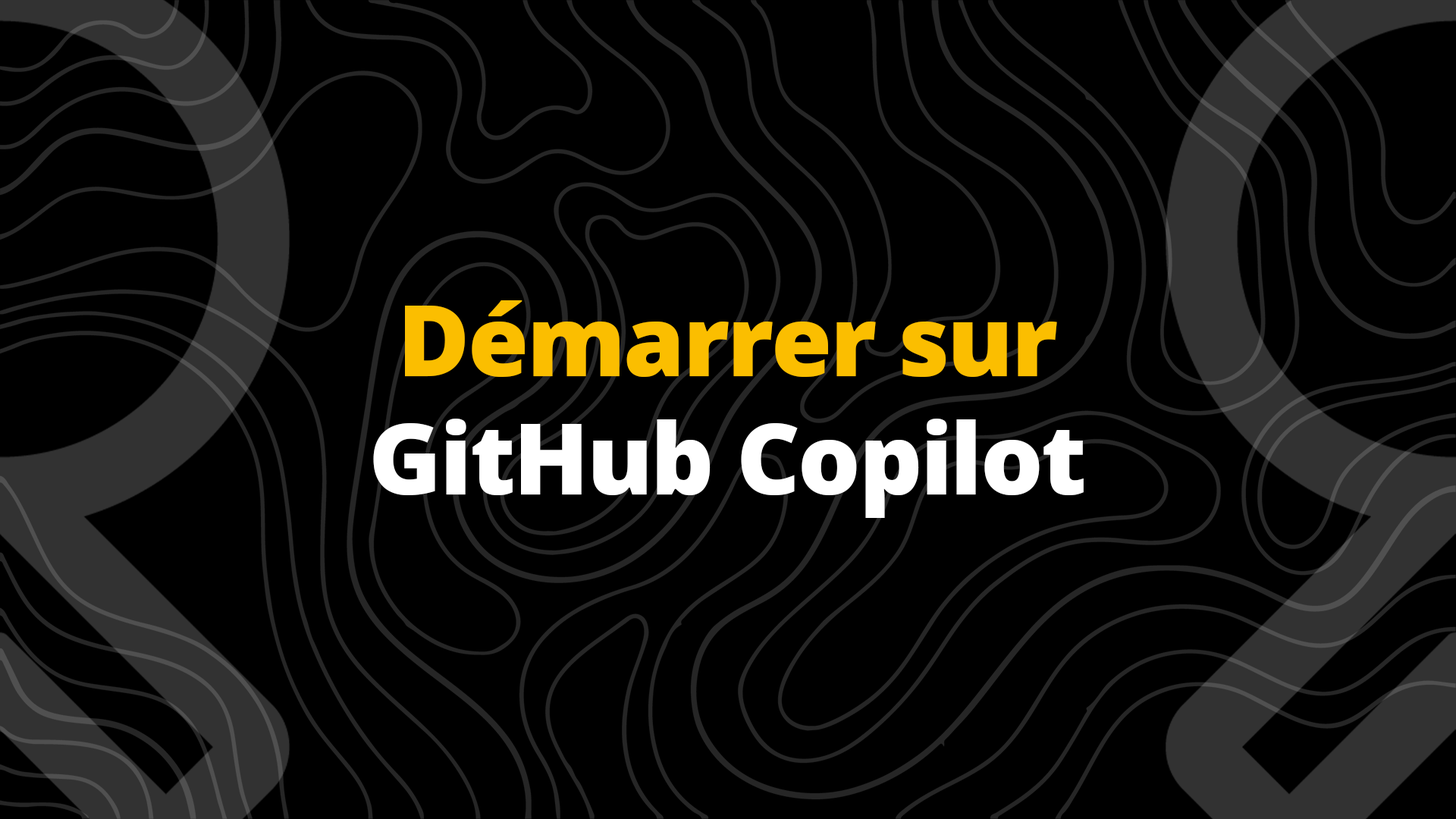
<style>
.page{position:relative;width:1456px;height:819px;background:#000000}
.page>*{position:absolute;margin:0}
.t1{font:98.6px "OpenSans-ExtraBold";letter-spacing:-0.02em;color:#ffffff}
.t2{font:98.6px "OpenSans-ExtraBold";letter-spacing:-0.02em;color:#fbbe00}
</style>
<div class="page">
<p class="t1" style="left:373px;top:300px;width:711px;height:218px;text-align:center"><span class="t2">Démarrer sur<br></span>GitHub Copilot</p>
</div>
